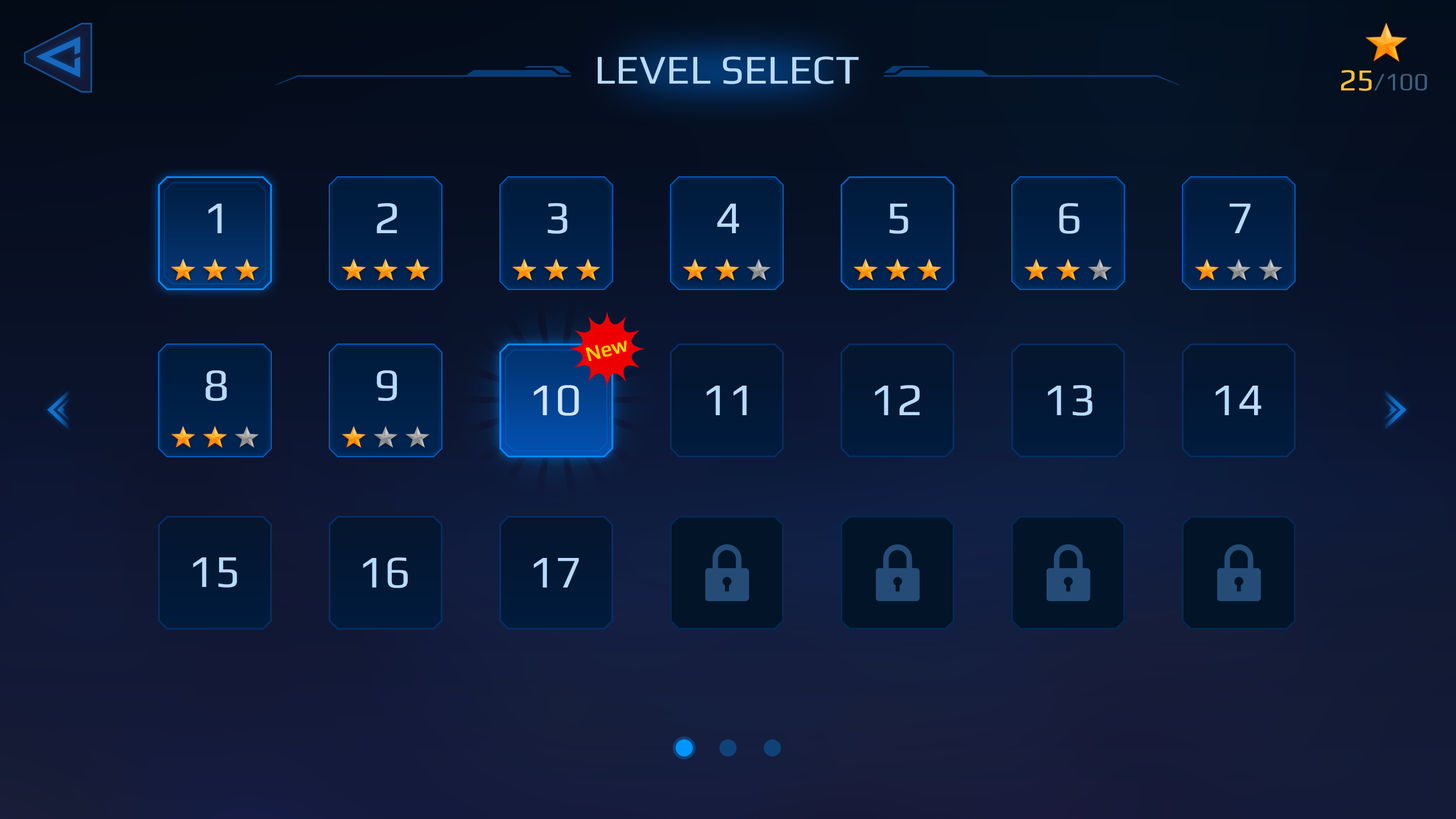
<style>
.page{position:relative;width:1456px;height:819px}
.page>*{position:absolute;margin:0}
.t1{font:40.9px "Play-Regular";color:#b7dbff}
.t2{font:25px "Play-Regular";color:#405e7c}
.t3{font:30.7px "Play-Regular";color:#ffc230}
.t4{font:45.5px "Play-Regular";color:#b7dbff}
.t5{font:20.5px "Play-Regular";color:#ffcc00;font-weight:bold}
.t6{font:45.5px "Play-Regular";color:#cee5ff}
</style>
<div class="page">
<p class="t1" style="left:598px;top:56px;width:261px;height:28px">LEVEL SELECT</p>
<p class="t2" style="left:1341px;top:70px;width:86px;height:21px"><span class="t3">25</span>/100</p>
<p class="t4" style="left:208px;top:204px;width:14px;height:29px">1</p>
<p class="t4" style="left:377px;top:203px;width:20px;height:30px">2</p>
<p class="t4" style="left:548px;top:203px;width:20px;height:31px">3</p>
<p class="t4" style="left:717px;top:204px;width:22px;height:29px">4</p>
<p class="t4" style="left:890px;top:204px;width:18px;height:30px">5</p>
<p class="t4" style="left:1059px;top:203px;width:20px;height:31px">6</p>
<p class="t4" style="left:1230px;top:204px;width:21px;height:29px">7</p>
<p class="t5" style="left:585px;top:341px;width:42px;height:20px;rotate:-15deg">New</p>
<p class="t4" style="left:205px;top:370px;width:22px;height:31px">8</p>
<p class="t4" style="left:377px;top:370px;width:20px;height:31px">9</p>
<p class="t6" style="left:533px;top:385px;width:46px;height:31px">10</p>
<p class="t4" style="left:706px;top:386px;width:41px;height:29px">11</p>
<p class="t4" style="left:875px;top:385px;width:45px;height:30px">12</p>
<p class="t4" style="left:1048px;top:385px;width:45px;height:31px">13</p>
<p class="t4" style="left:1215px;top:386px;width:46px;height:29px">14</p>
<p class="t4" style="left:193px;top:557px;width:44px;height:31px">15</p>
<p class="t4" style="left:363px;top:557px;width:45px;height:31px">16</p>
<p class="t4" style="left:533px;top:558px;width:46px;height:30px">17</p>
</div>
